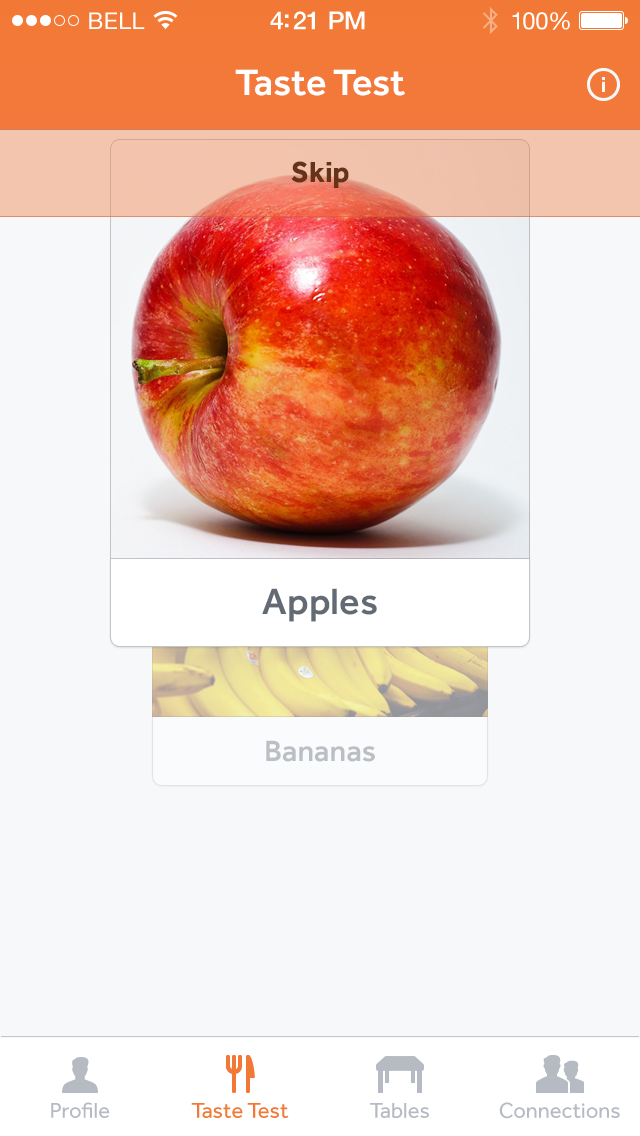
<style>
.page{position:relative;width:640px;height:1136px;background:#f6f8fa}
.page>*{position:absolute;margin:0}
.t1{font:23px "HelveticaNeue";letter-spacing:0.02em;color:#ffffff}
.t2{font:25px "HelveticaNeue-Medium";letter-spacing:-0.02em;color:#ffffff}
.t3{font:24px "HelveticaNeue";letter-spacing:-0.02em;color:#ffffff}
.t4{font:38px "Effra-Medium";color:#ffffff}
.t5{font:30px "Effra-Bold";color:#653317}
.t6{font:38px "Effra-Medium";color:#626a73}
.t7{font:30.4px "Effra-Medium";color:#bbbfc4}
.t8{font:22px "Effra-Regular";color:#b5bac3}
.t9{font:22px "Effra-Regular";color:#f27935}
</style>
<div class="page">
<p class="t1" style="left:89px;top:12px;width:56px;height:17px">BELL</p>
<p class="t2" style="left:270px;top:11px;width:95px;height:19px">4:21 PM</p>
<p class="t3" style="left:512px;top:12px;width:58px;height:18px">100%</p>
<p class="t4" style="left:235px;top:69px;width:170px;height:27px">Taste Test</p>
<p class="t5" style="left:291px;top:161px;width:58px;height:27px">Skip</p>
<p class="t6" style="left:262px;top:588px;width:115px;height:34px">Apples</p>
<p class="t7" style="left:266px;top:740px;width:109px;height:22px">Bananas</p>
<p class="t8" style="left:51px;top:1102px;width:59px;height:16px">Profile</p>
<p class="t9" style="left:191px;top:1103px;width:98px;height:15px">Taste Test</p>
<p class="t8" style="left:370px;top:1103px;width:59px;height:15px">Tables</p>
<p class="t8" style="left:499px;top:1102px;width:121px;height:17px">Connections</p>
</div>
